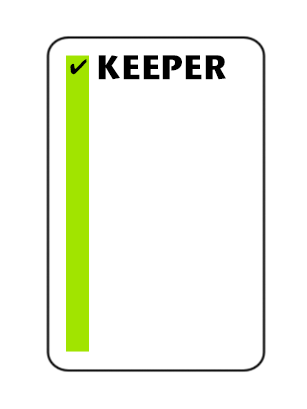
<style>
.page{position:relative;width:307px;height:409px;background:#ffffff}
.page>*{position:absolute;margin:0}
.t1{font:21.1px "MS-Gothic";color:#000000}
.t2{font:33.7px "StoneSansITC-Bold";color:#000000}
</style>
<div class="page">
<p class="t1" style="left:70px;top:59px;width:17px;height:16px">✔</p>
<p class="t2" style="left:98px;top:55px;width:128px;height:25px">KEEPER</p>
</div>
